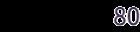
<style>
.page{position:relative;width:140px;height:32px;background:#000000}
.page>*{position:absolute;margin:0}
.t1{font:24px "WebPSD-18463539-0-Regular";color:#3f3254;font-weight:bold}
</style>
<div class="page">
<p class="t1" style="left:0px;top:0px;width:140px;height:32px">80</p>
</div>
